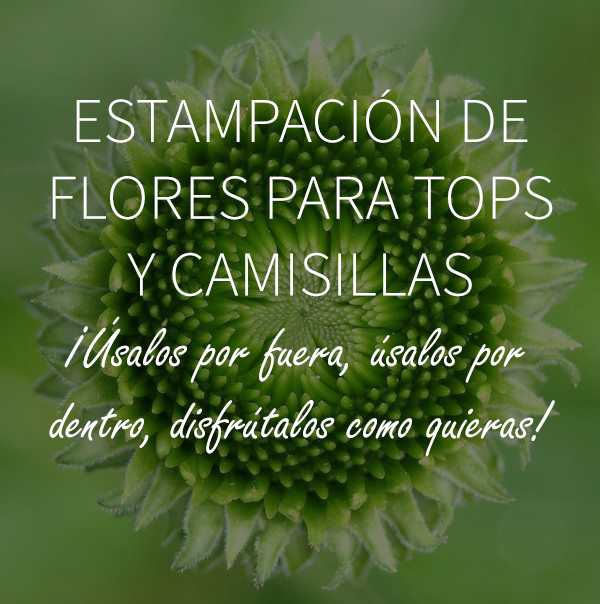
<style>
.page{position:relative;width:600px;height:604px}
.page>*{position:absolute;margin:0}
.t1{font:60px "FreestyleScript-Regular";color:#fefefe}
.t2{font:64px "SourceSansPro-Light";color:#fefefe}
.t3{font:60px "FreestyleScript-Regular";letter-spacing:-0.16em;color:#fefefe}
</style>
<div class="page">
<p class="t1" style="left:49px;top:89px;width:506px;height:368px;text-align:center"><span class="t2">ESTAMPACIÓN DE FLORES PARA TOPS Y CAMISILLAS<br></span><span class="t3">¡</span>Úsalos por fuera, úsalos por dentro, disfrútalos como quieras!</p>
</div>
